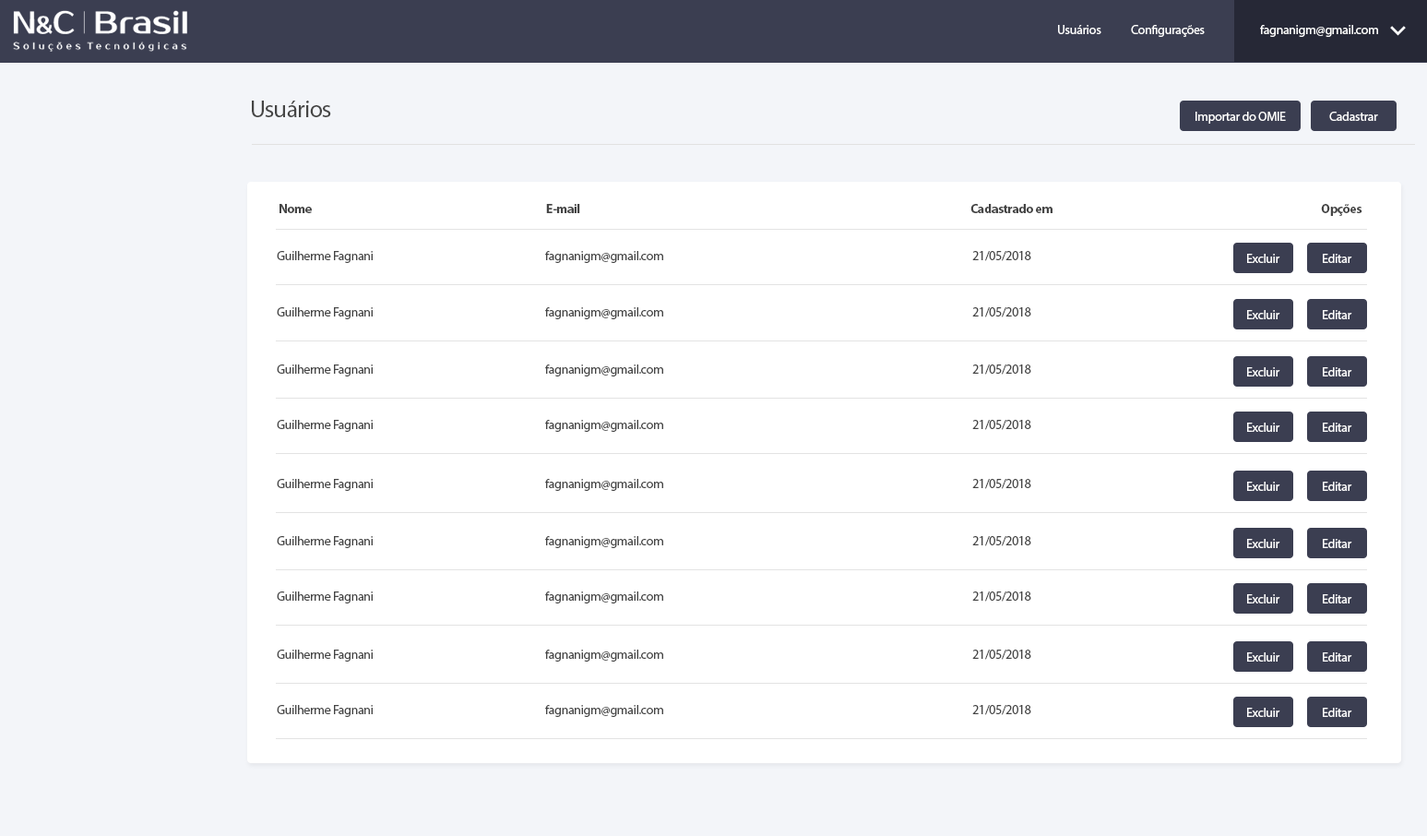
<style>
.page{position:relative;width:1427px;height:836px;background:#ffffff}
.page>*{position:absolute;margin:0}
.t1{font:12.9px "MyriadPro-Regular";letter-spacing:-0.025em;color:#ffffff}
.t2{font:24px "MyriadPro-Regular";letter-spacing:-0.025em;color:#454545}
.t3{font:12.9px "MyriadPro-Bold";letter-spacing:-0.025em;color:#454545}
.t4{font:12.9px "MyriadPro-Regular";letter-spacing:-0.025em;color:#454545}
</style>
<div class="page">
<p class="t1" style="left:1058px;top:25px;width:43px;height:9px">Usuários</p>
<p class="t1" style="left:1131px;top:25px;width:74px;height:12px">Configurações</p>
<p class="t1" style="left:1260px;top:25px;width:118px;height:12px">fagnanigm@gmail.com</p>
<p class="t2" style="left:252px;top:101px;width:79px;height:16px">Usuários</p>
<p class="t1" style="left:1195px;top:112px;width:91px;height:12px">Importar do OMIE</p>
<p class="t1" style="left:1329px;top:112px;width:49px;height:9px">Cadastrar</p>
<p class="t3" style="left:279px;top:204px;width:33px;height:9px">Nome</p>
<p class="t3" style="left:546px;top:204px;width:34px;height:9px">E-mail</p>
<p class="t3" style="left:970px;top:204px;width:82px;height:9px">Cadastrado em</p>
<p class="t3" style="left:1321px;top:204px;width:41px;height:12px">Opções</p>
<p class="t4" style="left:277px;top:251px;width:96px;height:12px">Guilherme Fagnani</p>
<p class="t4" style="left:545px;top:251px;width:118px;height:12px">fagnanigm@gmail.com</p>
<p class="t4" style="left:972px;top:251px;width:59px;height:10px">21/05/2018</p>
<p class="t1" style="left:1247px;top:254px;width:33px;height:9px">Excluir</p>
<p class="t1" style="left:1323px;top:254px;width:29px;height:9px">Editar</p>
<p class="t4" style="left:277px;top:307px;width:96px;height:12px">Guilherme Fagnani</p>
<p class="t4" style="left:545px;top:307px;width:118px;height:12px">fagnanigm@gmail.com</p>
<p class="t4" style="left:972px;top:307px;width:59px;height:10px">21/05/2018</p>
<p class="t1" style="left:1247px;top:310px;width:33px;height:9px">Excluir</p>
<p class="t1" style="left:1323px;top:310px;width:29px;height:9px">Editar</p>
<p class="t4" style="left:277px;top:364px;width:96px;height:12px">Guilherme Fagnani</p>
<p class="t4" style="left:545px;top:364px;width:118px;height:12px">fagnanigm@gmail.com</p>
<p class="t4" style="left:972px;top:364px;width:59px;height:10px">21/05/2018</p>
<p class="t1" style="left:1247px;top:367px;width:33px;height:9px">Excluir</p>
<p class="t1" style="left:1323px;top:367px;width:29px;height:9px">Editar</p>
<p class="t4" style="left:277px;top:420px;width:96px;height:12px">Guilherme Fagnani</p>
<p class="t4" style="left:545px;top:420px;width:118px;height:12px">fagnanigm@gmail.com</p>
<p class="t4" style="left:972px;top:420px;width:59px;height:10px">21/05/2018</p>
<p class="t1" style="left:1247px;top:422px;width:33px;height:10px">Excluir</p>
<p class="t1" style="left:1323px;top:422px;width:29px;height:10px">Editar</p>
<p class="t4" style="left:277px;top:479px;width:96px;height:12px">Guilherme Fagnani</p>
<p class="t4" style="left:545px;top:479px;width:118px;height:12px">fagnanigm@gmail.com</p>
<p class="t4" style="left:972px;top:479px;width:59px;height:10px">21/05/2018</p>
<p class="t1" style="left:1247px;top:481px;width:33px;height:10px">Excluir</p>
<p class="t1" style="left:1323px;top:481px;width:29px;height:10px">Editar</p>
<p class="t4" style="left:277px;top:536px;width:96px;height:12px">Guilherme Fagnani</p>
<p class="t4" style="left:545px;top:536px;width:118px;height:12px">fagnanigm@gmail.com</p>
<p class="t4" style="left:972px;top:536px;width:59px;height:10px">21/05/2018</p>
<p class="t1" style="left:1247px;top:539px;width:33px;height:9px">Excluir</p>
<p class="t1" style="left:1323px;top:539px;width:29px;height:9px">Editar</p>
<p class="t4" style="left:277px;top:591px;width:96px;height:12px">Guilherme Fagnani</p>
<p class="t4" style="left:545px;top:591px;width:118px;height:12px">fagnanigm@gmail.com</p>
<p class="t4" style="left:972px;top:591px;width:59px;height:10px">21/05/2018</p>
<p class="t1" style="left:1247px;top:594px;width:33px;height:9px">Excluir</p>
<p class="t1" style="left:1323px;top:594px;width:29px;height:9px">Editar</p>
<p class="t4" style="left:277px;top:649px;width:96px;height:12px">Guilherme Fagnani</p>
<p class="t4" style="left:545px;top:649px;width:118px;height:12px">fagnanigm@gmail.com</p>
<p class="t4" style="left:972px;top:649px;width:59px;height:10px">21/05/2018</p>
<p class="t1" style="left:1247px;top:652px;width:33px;height:9px">Excluir</p>
<p class="t1" style="left:1323px;top:652px;width:29px;height:9px">Editar</p>
<p class="t4" style="left:277px;top:705px;width:96px;height:12px">Guilherme Fagnani</p>
<p class="t4" style="left:545px;top:705px;width:118px;height:12px">fagnanigm@gmail.com</p>
<p class="t4" style="left:972px;top:705px;width:59px;height:10px">21/05/2018</p>
<p class="t1" style="left:1247px;top:707px;width:33px;height:10px">Excluir</p>
<p class="t1" style="left:1323px;top:707px;width:29px;height:10px">Editar</p>
</div>
